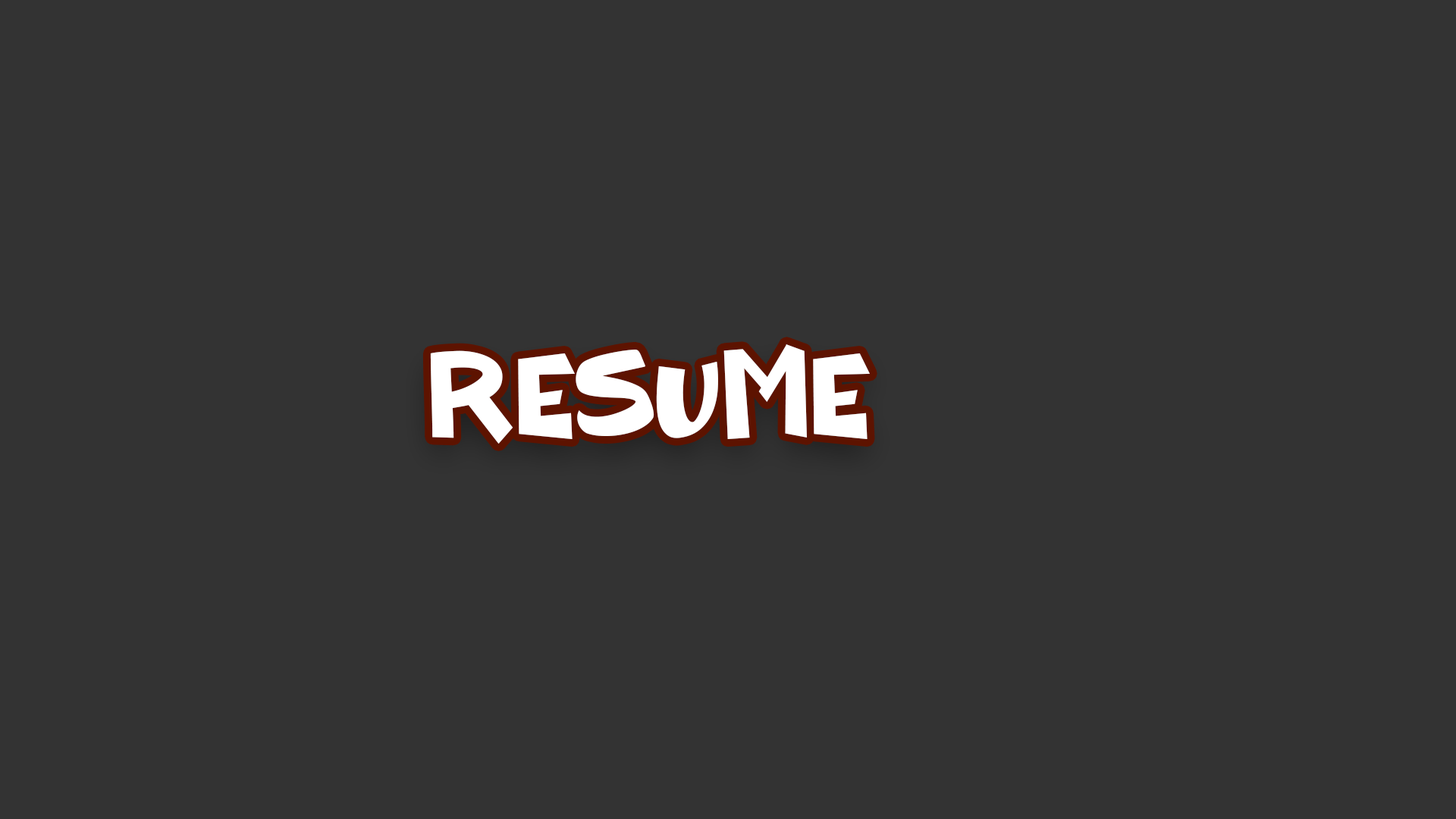
<style>
.page{position:relative;width:1456px;height:819px;background:#333333}
.page>*{position:absolute;margin:0}
.t1{font:136.8px "BLOCKHEADDUDEPersonalUse";color:#ffffff;scale:0.83 1}
</style>
<div class="page">
<p class="t1" style="left:430px;top:344px;width:440px;height:100px">resume</p>
</div>
